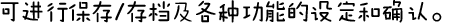
<style>
.page{position:relative;width:474px;height:23px;background:#ffffff}
.page>*{position:absolute;margin:0}
.t1{font:26px "¢è?";color:#000000}
</style>
<div class="page">
<p class="t1" style="left:0px;top:0px;width:442px;height:23px">可进行保存/存档及各种功能的设定和确认。</p>
</div>
